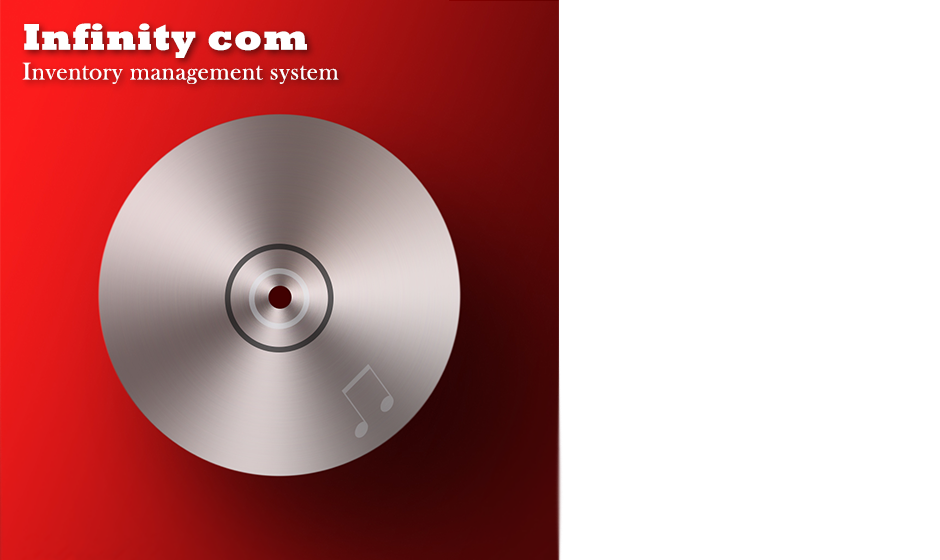
<style>
.page{position:relative;width:940px;height:560px;background:#ffffff}
.page>*{position:absolute;margin:0}
.t1{font:37.5px "Rockwell-ExtraBold";letter-spacing:0.025em;color:#ffffff}
.t2{font:25px "BaskOldFace";letter-spacing:0.025em;color:#ffffff}
</style>
<div class="page">
<p class="t1" style="left:24px;top:23px;width:283px;height:35px">Infinity com</p>
<p class="t2" style="left:22px;top:62px;width:317px;height:22px">Inventory management system</p>
</div>
